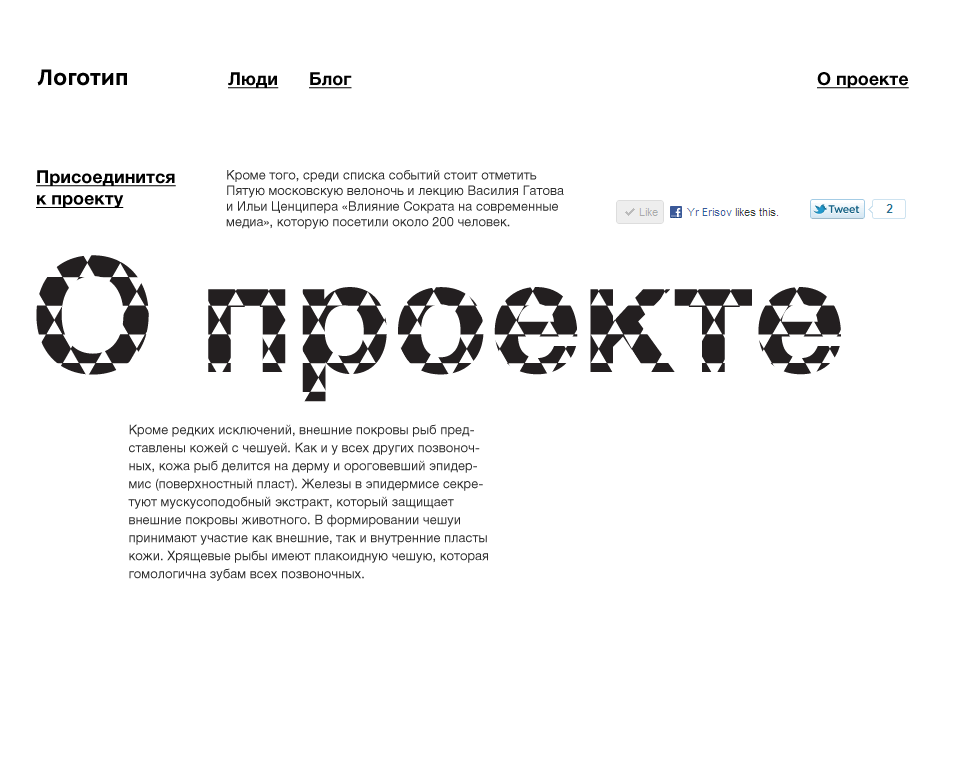
<style>
.page{position:relative;width:960px;height:760px;background:#ffffff}
.page>*{position:absolute;margin:0}
.t1{font:24px "OksanaSansNarrow-Bold";color:#000000}
.t2{font:18px "HelveticaNeueLTCYR-Bold";color:#000000;text-decoration:underline}
.t3{font:13px "HelveticaNeueLTCYR-Roman";color:#2c2c2c}
.t4{font:13px/18px "HelveticaNeueLTCYR-Roman";color:#2c2c2c}
</style>
<div class="page">
<p class="t1" style="left:37px;top:69px;width:90px;height:17px">Логотип</p>
<p class="t2" style="left:228px;top:72px;width:51px;height:17px">Люди</p>
<p class="t2" style="left:309px;top:72px;width:43px;height:17px">Блог</p>
<p class="t2" style="left:817px;top:72px;width:92px;height:17px">О проекте</p>
<p class="t2" style="left:36px;top:170px;width:140px;height:38px">Присоединится<br>к проекту</p>
<p class="t3" style="left:226px;top:170px;width:338px;height:59px">Кроме того, среди списка событий стоит отметить Пятую московскую велоночь и лекцию Василия Гатова и Ильи Ценципера «Влияние Сократа на современные медиа», которую посетили около 200 человек.</p>
<p class="t4" style="left:128px;top:424px;width:360px;height:157px">Кроме редких исключений, внешние покровы рыб представлены кожей с чешуей. Как и у всех других позвоночных, кожа рыб делится на дерму и ороговевший эпидермис (поверхностный пласт). Железы в эпидермисе секретуют мускусоподобный экстракт, который защищает внешние покровы животного. В формировании чешуи принимают участие как внешние, так и внутренние пласты кожи. Хрящевые рыбы имеют плакоидную чешую, которая гомологична зубам всех позвоночных.</p>
</div>
